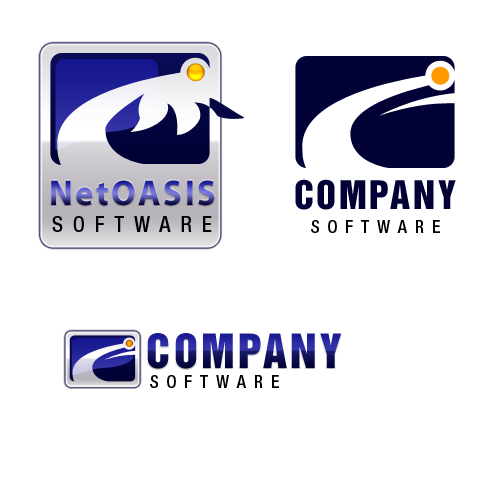
<style>
.page{position:relative;width:500px;height:500px;background:#ffffff}
.page>*{position:absolute;margin:0}
.t1{font:35.9px "MyriadPro-Bold";letter-spacing:0.075em;scale:0.96 1}
.t2{font:35.9px "HelveticaInserat-Roman";letter-spacing:0.075em;color:#010136}
.t3{font:21.6px "HelveticaNeue-MediumCond";letter-spacing:0.45em;color:#000000}
.t4{font:17.5px "HelveticaNeue-MediumCond";letter-spacing:0.45em;color:#000000}
.t5{font:43.2px "HelveticaInserat-Roman";letter-spacing:0.075em}
</style>
<div class="page">
<p class="t1" style="left:51px;top:180px;width:164px;height:26px">NetOASIS</p>
<p class="t2" style="left:295px;top:179px;width:161px;height:31px">COMPANY</p>
<p class="t3" style="left:52px;top:216px;width:160px;height:16px">SOFTWARE</p>
<p class="t4" style="left:311px;top:220px;width:129px;height:13px">SOFTWARE</p>
<p class="t5" style="left:147px;top:333px;width:195px;height:36px">COMPANY</p>
<p class="t4" style="left:150px;top:375px;width:129px;height:13px">SOFTWARE</p>
</div>
